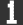
<style>
.page{position:relative;width:23px;height:25px;background:#333333}
.page>*{position:absolute;margin:0}
.t1{font:38.9px "VT323-Regular";color:#ffffff;font-weight:bold;scale:0.9 1}
</style>
<div class="page">
<p class="t1" style="left:6px;top:0px;width:11px;height:24px">1</p>
</div>
